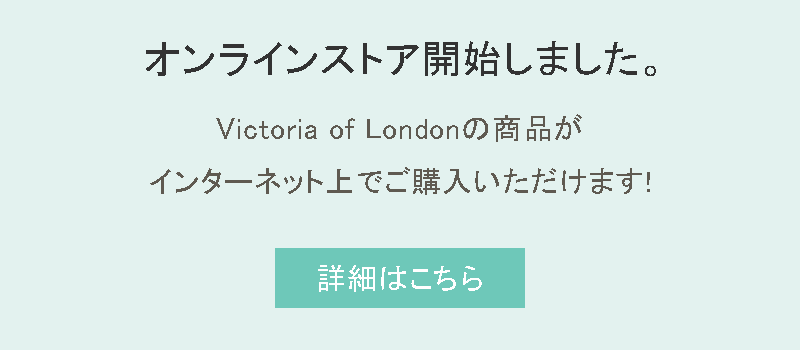
<style>
.page{position:relative;width:800px;height:350px;background:#e3f2ef}
.page>*{position:absolute;margin:0}
.t1{font:40px "MS-PGothic";letter-spacing:0.025em;color:#333333}
.t2{font:30px "MS-PGothic";letter-spacing:0.025em;color:#5f5a51}
.t3{font:30px "MS-PGothic";letter-spacing:0.025em;color:#ffffff}
</style>
<div class="page">
<p class="t1" style="left:146px;top:41px;width:510px;height:35px">オンラインストア開始しました。</p>
<p class="t2" style="left:150px;top:114px;width:500px;height:81px;text-align:center">Victoria of Londonの商品が<br>インターネット上でご購入いただけます!</p>
<p class="t3" style="left:318px;top:265px;width:164px;height:27px">詳細はこちら</p>
</div>
